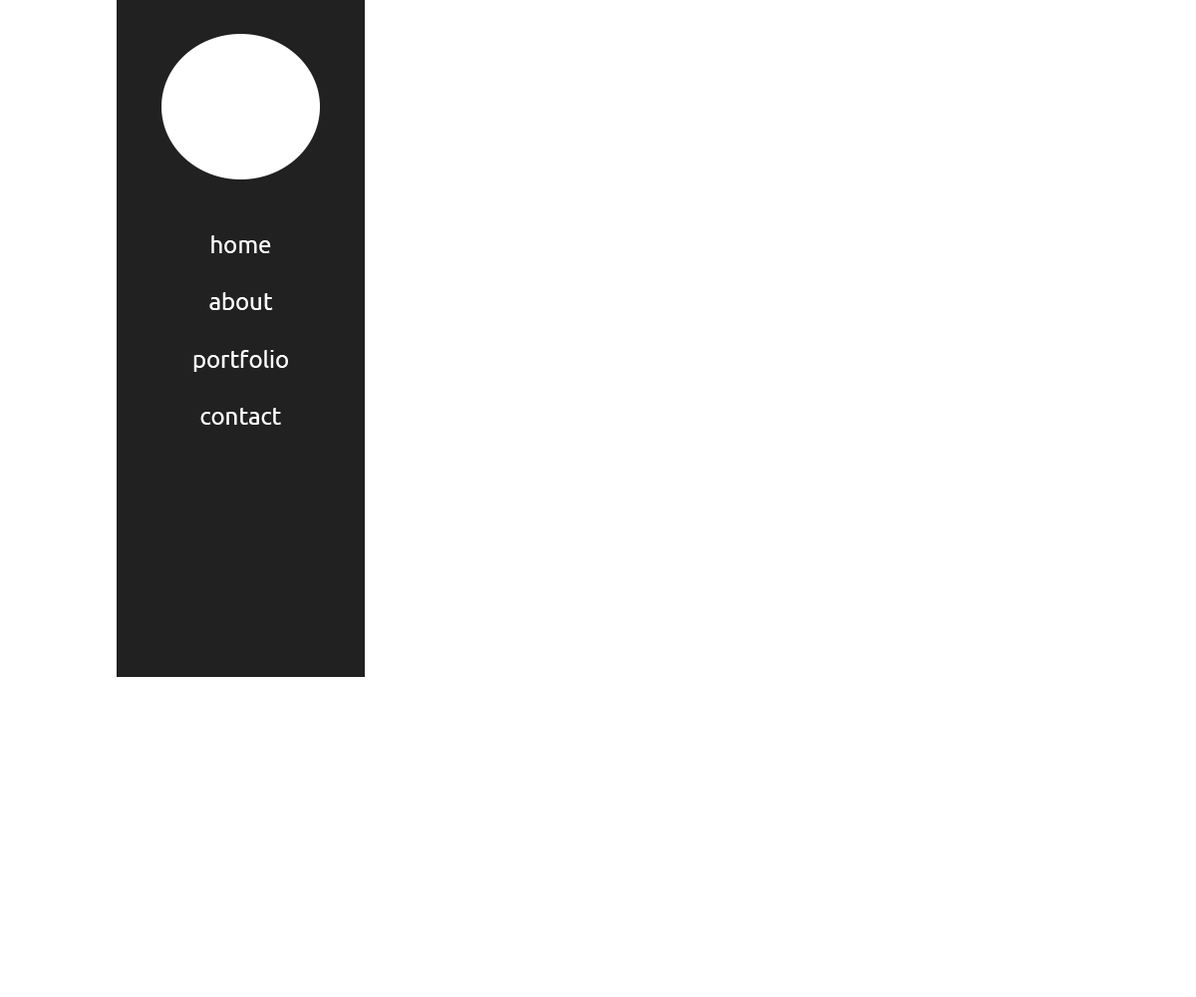
<style>
.page{position:relative;width:1196px;height:997px;background:#ffffff}
.page>*{position:absolute;margin:0}
.t1{font:23.9px "Ubuntu-Regular";color:#ffffff}
</style>
<div class="page">
<p class="t1" style="left:193px;top:235px;width:95px;height:190px;text-align:center">home<br><br>about<br><br>portfolio<br><br>contact</p>
</div>
